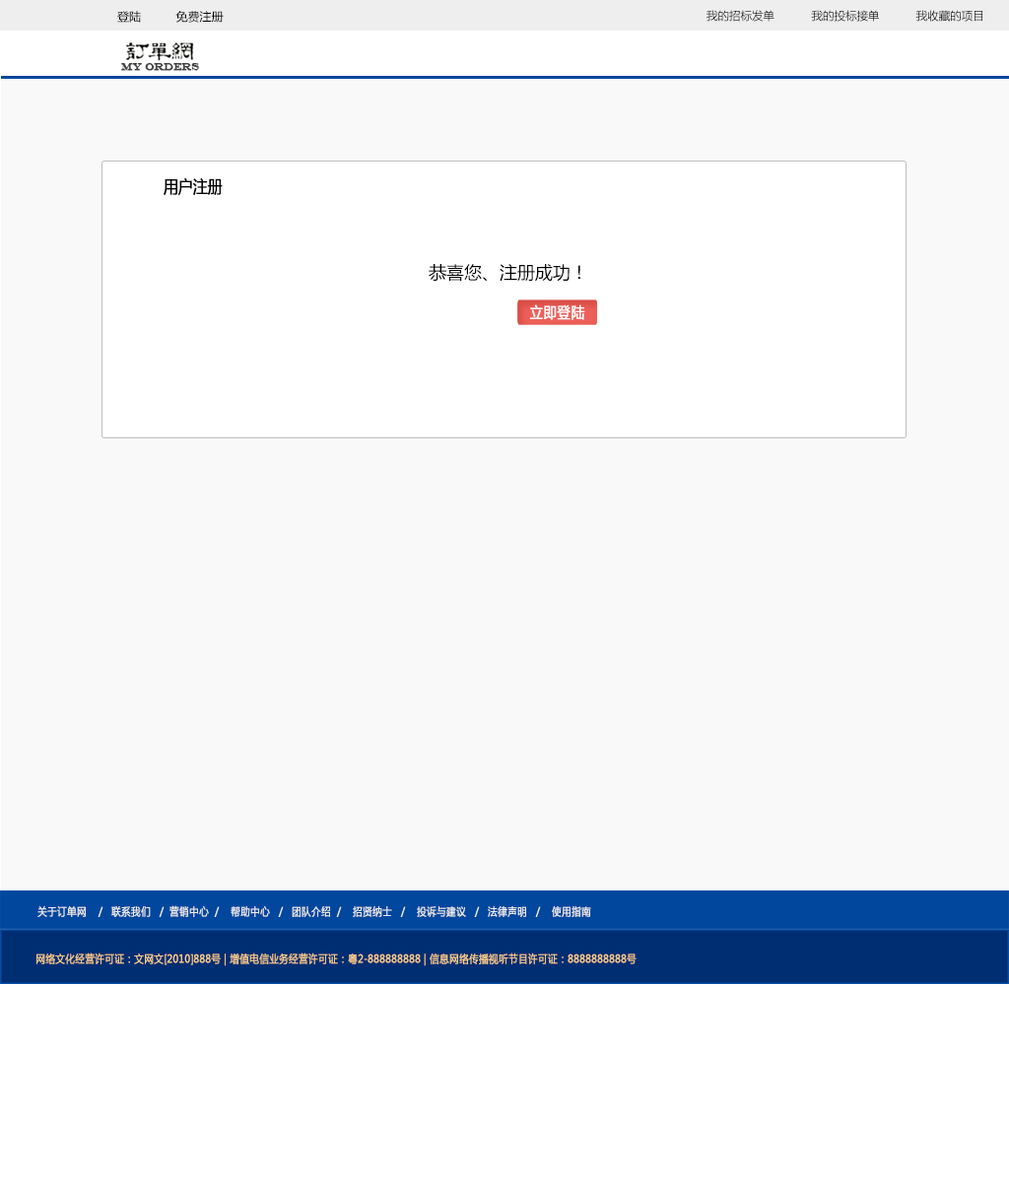
<style>
.page{position:relative;width:1009px;height:1182px;background:#f9f9f9}
.page>*{position:absolute;margin:0}
.t1{font:11.8px "MicrosoftYaHei";color:#000000}
.t2{font:11.3px "MicrosoftYaHei";color:#000000}
.t3{font:10.8px "EngraversMT";color:#434343;font-variant:small-caps;font-weight:bold;scale:0.86 1}
.t4{font:17.2px "MicrosoftYaHei";color:#000000;font-variant:small-caps;font-weight:bold;scale:0.86 1}
.t5{font:17.7px "MicrosoftYaHei";color:#000000}
.t6{font:15.2px "MicrosoftYaHei";color:#ffffff;font-variant:small-caps;font-weight:bold;scale:0.86 1}
.t7{font:10.8px "MicrosoftYaHei";color:#eeeeee;font-variant:small-caps;font-weight:bold;scale:0.86 1}
.t8{font:15.2px "STXihei";color:#eeeeee;font-variant:small-caps;font-weight:bold;scale:0.86 1}
.t9{font:10.8px "MicrosoftYaHei";color:#facd89;font-variant:small-caps;font-weight:bold;scale:0.87 1}
.t10{font:10.8px "MicrosoftYaHei";color:#eeeeee;font-variant:small-caps;font-weight:bold;scale:0.87 1}
</style>
<div class="page">
<p class="t1" style="left:117px;top:11px;width:107px;height:12px">登陆          免费注册</p>
<p class="t2" style="left:706px;top:10px;width:276px;height:12px">我的招标发单           我的投标接单           我收藏的项目</p>
<p class="t3" style="left:121px;top:63px;width:78px;height:8px">MY ORDERS</p>
<p class="t4" style="left:164px;top:177px;width:59px;height:19px">用户注册</p>
<p class="t5" style="left:429px;top:264px;width:151px;height:18px">恭喜您、注册成功！</p>
<p class="t6" style="left:530px;top:304px;width:55px;height:16px">立即登陆</p>
<p class="t7" style="left:37px;top:905px;width:554px;height:12px"><span class="t8"><br><br></span>关于订单网    /   联系我们   /  营销中心  /    帮助中心   /   团队介绍  /    招贤纳士   /    投诉与建议   /   法律声明   /    使用指南</p>
<p class="t9" style="left:36px;top:953px;width:600px;height:13px"><span class="t10"> </span>网络文化经营许可证：文网文[2010]888号 | 增值电信业务经营许可证：粤2-888888888 | 信息网络传播视听节目许可证：8888888888号</p>
</div>
